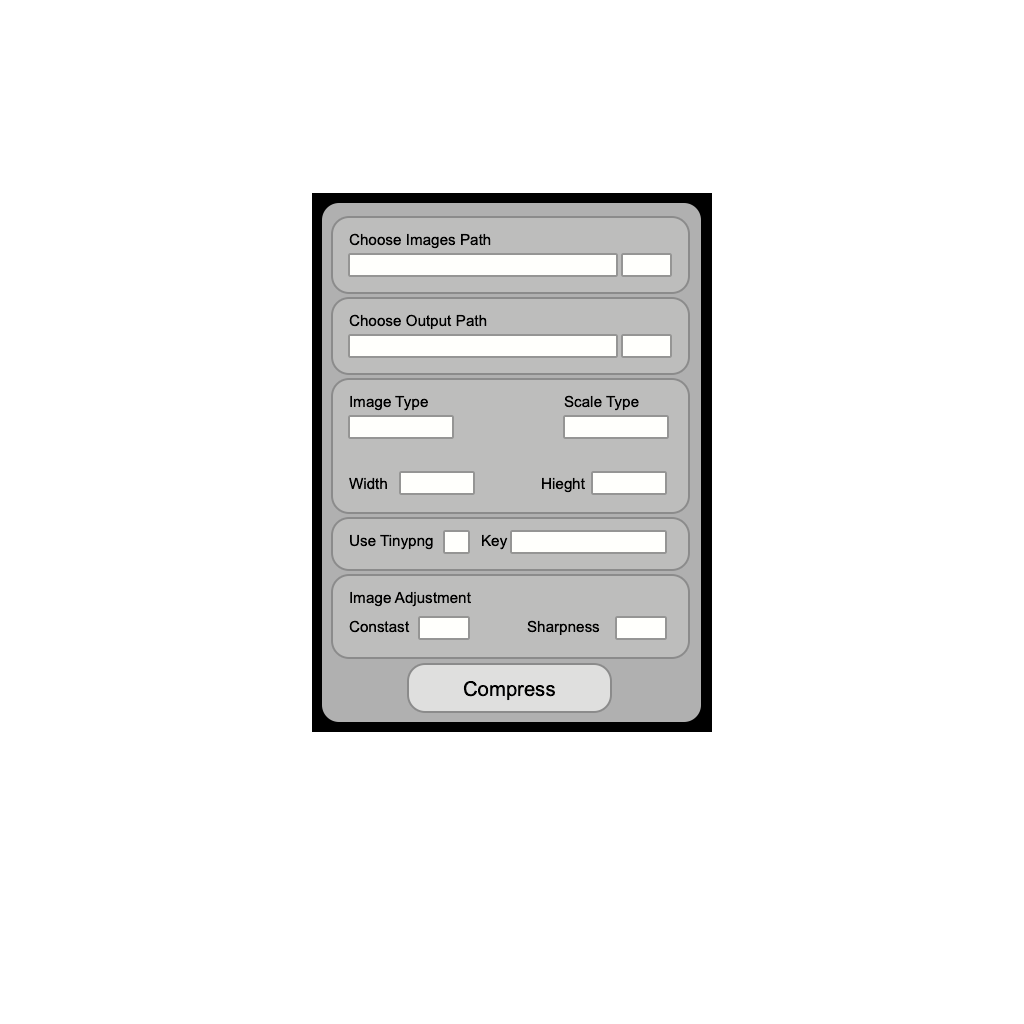
<style>
.page{position:relative;width:1024px;height:1024px;background:#ffffff}
.page>*{position:absolute;margin:0}
.t1{font:15.2px "ArialMT";color:#000000}
.t2{font:20.3px "ArialMT";color:#000000}
</style>
<div class="page">
<p class="t1" style="left:349px;top:233px;width:142px;height:16px">Choose Images Path</p>
<p class="t1" style="left:349px;top:314px;width:138px;height:16px">Choose Output Path</p>
<p class="t1" style="left:350px;top:395px;width:78px;height:16px">Image Type</p>
<p class="t1" style="left:564px;top:395px;width:75px;height:16px">Scale Type</p>
<p class="t1" style="left:349px;top:477px;width:38px;height:13px">Width</p>
<p class="t1" style="left:542px;top:477px;width:43px;height:16px">Hieght</p>
<p class="t1" style="left:350px;top:534px;width:83px;height:16px">Use Tinypng</p>
<p class="t1" style="left:482px;top:534px;width:26px;height:16px">Key</p>
<p class="t1" style="left:350px;top:591px;width:121px;height:16px">Image Adjustment</p>
<p class="t1" style="left:349px;top:620px;width:61px;height:13px">Constast</p>
<p class="t1" style="left:527px;top:620px;width:73px;height:16px">Sharpness</p>
<p class="t2" style="left:463px;top:681px;width:92px;height:20px">Compress</p>
</div>
